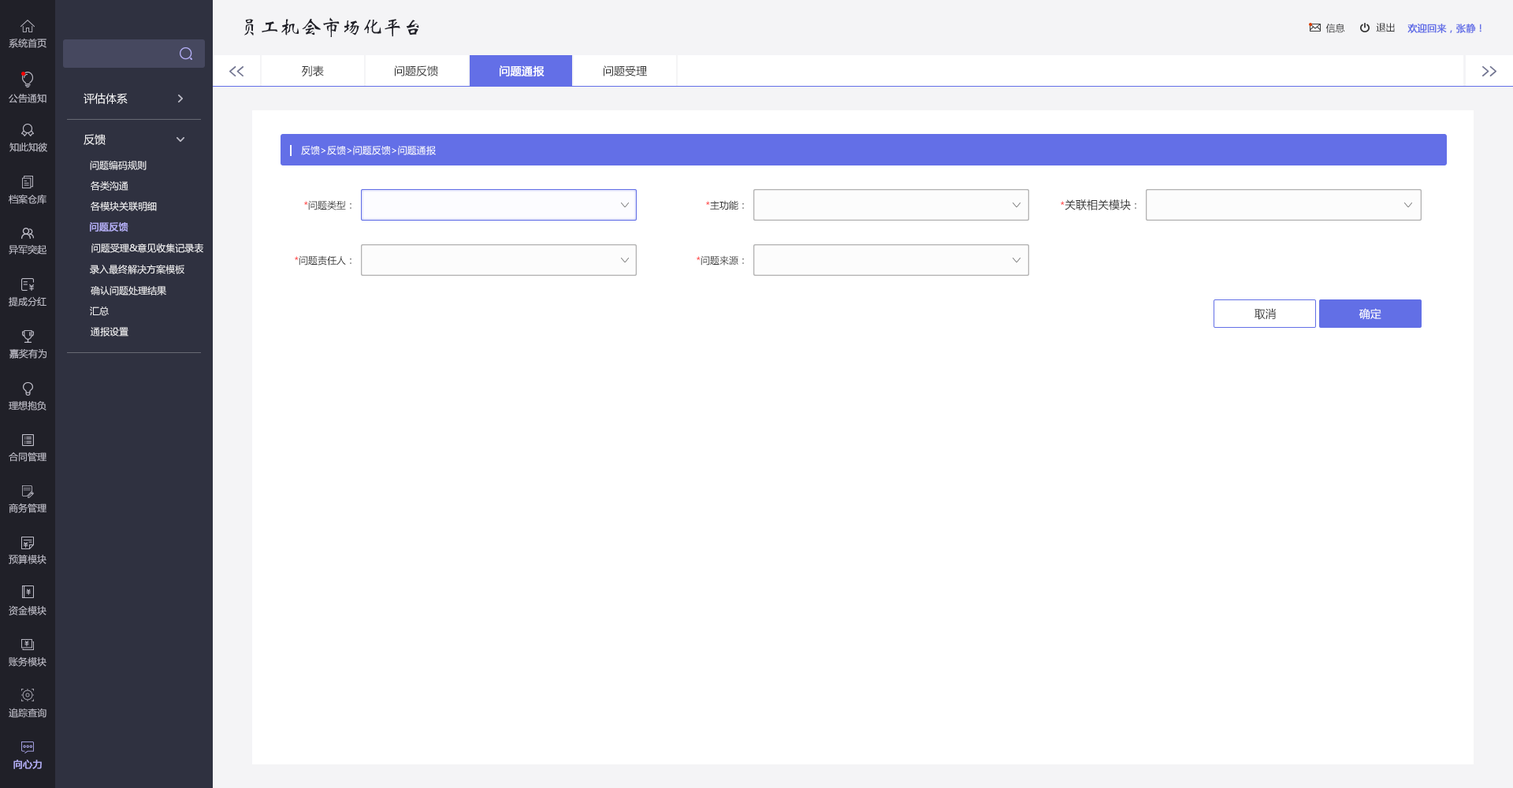
<style>
.page{position:relative;width:1513px;height:788px;background:#ffffff}
.page>*{position:absolute;margin:0}
.t1{font:20.5px "STXinwei";color:#202028}
.t2{font:9.5px "MicrosoftYaHei";color:#333333}
.t3{font:9.5px "MicrosoftYaHei";color:#636fe7;font-weight:bold}
.t4{font:9.5px "MicrosoftYaHei";color:#bfbec9}
.t5{font:11px "MicrosoftYaHei";color:#333333}
.t6{font:11px "MicrosoftYaHei";color:#ffffff;font-weight:bold}
.t7{font:11px "MicrosoftYaHei";color:#f4f4f6}
.t8{font:9.5px "MicrosoftYaHei";color:#ffffff}
.t9{font:9.5px "MicrosoftYaHei";color:#f4f4f6}
.t10{font:9.5px "MicrosoftYaHei";color:#ff0101}
.t11{font:9.5px "MicrosoftYaHei";color:#b3aef5;font-weight:bold}
.t12{font:11px "MicrosoftYaHei";color:#ffffff}
</style>
<div class="page">
<p class="t1" style="left:244px;top:17px;width:175px;height:20px">员工机会市场化平台</p>
<p class="t2" style="left:1326px;top:24px;width:19px;height:9px">信息</p>
<p class="t2" style="left:1376px;top:23px;width:19px;height:9px">退出</p>
<p class="t3" style="left:1407px;top:24px;width:75px;height:9px">欢迎回来，张静！</p>
<p class="t4" style="left:9px;top:38px;width:37px;height:10px">系统首页</p>
<p class="t5" style="left:302px;top:65px;width:22px;height:11px">列表</p>
<p class="t5" style="left:395px;top:65px;width:43px;height:11px">问题反馈</p>
<p class="t6" style="left:500px;top:65px;width:45px;height:11px">问题通报</p>
<p class="t5" style="left:604px;top:65px;width:43px;height:11px">问题受理</p>
<p class="t4" style="left:9px;top:94px;width:37px;height:9px">公告通知</p>
<p class="t7" style="left:84px;top:93px;width:44px;height:11px">评估体系</p>
<p class="t7" style="left:84px;top:134px;width:22px;height:11px">反馈</p>
<p class="t4" style="left:9px;top:143px;width:38px;height:9px">知此知彼</p>
<p class="t8" style="left:301px;top:146px;width:135px;height:9px">反馈&gt;反馈&gt;问题反馈&gt;问题通报</p>
<p class="t9" style="left:90px;top:161px;width:57px;height:9px">问题编码规则</p>
<p class="t9" style="left:91px;top:181px;width:37px;height:10px">各类沟通</p>
<p class="t4" style="left:9px;top:194px;width:37px;height:10px">档案仓库</p>
<p class="t9" style="left:91px;top:202px;width:66px;height:9px">各模块关联明细</p>
<p class="t2" style="left:304px;top:200px;width:47px;height:10px"><span class="t10">*</span>问题类型：</p>
<p class="t2" style="left:706px;top:200px;width:38px;height:10px"><span class="t10">*</span>主功能：</p>
<p class="t5" style="left:1061px;top:199px;width:75px;height:11px"><span class="t10">*</span>关联相关模块<span class="t2">：</span></p>
<p class="t11" style="left:90px;top:222px;width:38px;height:10px">问题反馈</p>
<p class="t4" style="left:9px;top:244px;width:37px;height:11px">异军突起</p>
<p class="t9" style="left:91px;top:244px;width:112px;height:9px">问题受理&amp;意见收集记录表</p>
<p class="t2" style="left:295px;top:255px;width:56px;height:11px"><span class="t10">*</span>问题责任人：</p>
<p class="t2" style="left:697px;top:255px;width:47px;height:11px"><span class="t10">*</span>问题来源：</p>
<p class="t9" style="left:90px;top:264px;width:94px;height:10px">录入最终解决方案模板</p>
<p class="t9" style="left:91px;top:286px;width:75px;height:10px">确认问题处理结果</p>
<p class="t4" style="left:9px;top:296px;width:37px;height:11px">提成分红</p>
<p class="t9" style="left:90px;top:307px;width:19px;height:9px">汇总</p>
<p class="t5" style="left:1255px;top:308px;width:21px;height:12px">取消</p>
<p class="t12" style="left:1359px;top:308px;width:22px;height:12px">确定</p>
<p class="t9" style="left:91px;top:327px;width:37px;height:10px">通报设置</p>
<p class="t4" style="left:9px;top:349px;width:37px;height:10px">嘉奖有为</p>
<p class="t4" style="left:9px;top:401px;width:37px;height:10px">理想抱负</p>
<p class="t4" style="left:9px;top:452px;width:37px;height:10px">合同管理</p>
<p class="t4" style="left:9px;top:503px;width:37px;height:10px">商务管理</p>
<p class="t4" style="left:9px;top:555px;width:37px;height:9px">预算模块</p>
<p class="t4" style="left:9px;top:605px;width:37px;height:10px">资金模块</p>
<p class="t4" style="left:9px;top:656px;width:37px;height:11px">账务模块</p>
<p class="t4" style="left:9px;top:708px;width:37px;height:10px">追踪查询</p>
<p class="t11" style="left:13px;top:760px;width:29px;height:9px">向心力</p>
</div>
